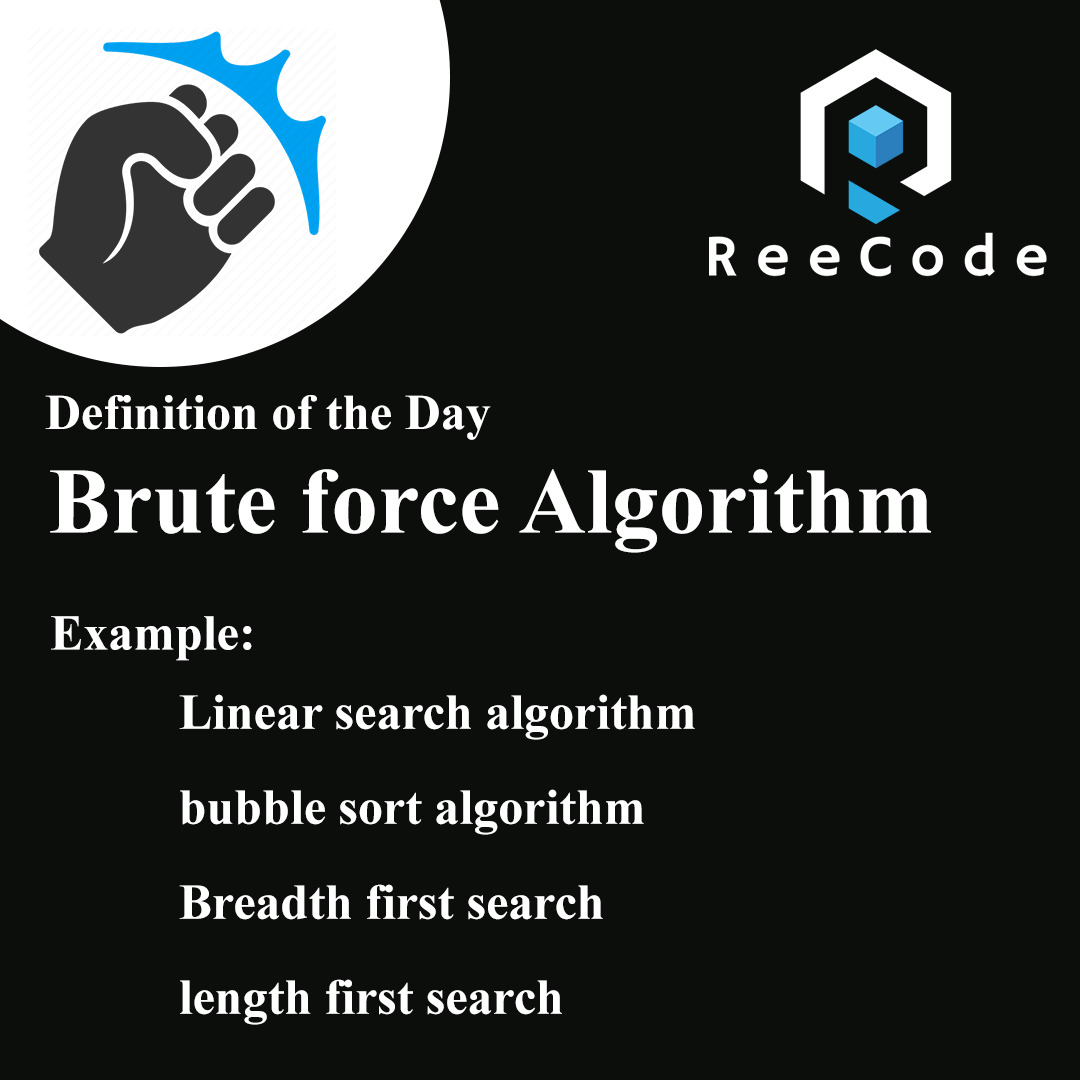
<style>
.page{position:relative;width:1080px;height:1080px;background:#0c0e0c}
.page>*{position:absolute;margin:0}
.t1{font:50px "TimesNewRomanPS-BoldMT";color:#ffffff}
.t2{font:93.4px "TimesNewRomanPS-BoldMT";color:#ffffff}
.t3{font:50px/95px "TimesNewRomanPS-BoldMT";color:#ffffff}
</style>
<div class="page">
<p class="t1" style="left:45px;top:395px;width:446px;height:45px">Definition of the Day</p>
<p class="t2" style="left:50px;top:469px;width:881px;height:84px">Brute force Algorithm</p>
<p class="t1" style="left:51px;top:616px;width:201px;height:45px">Example:</p>
<p class="t3" style="left:179px;top:694px;width:516px;height:331px">Linear search algorithm<br>bubble sort algorithm<br>Breadth first search<br>length first search</p>
</div>
